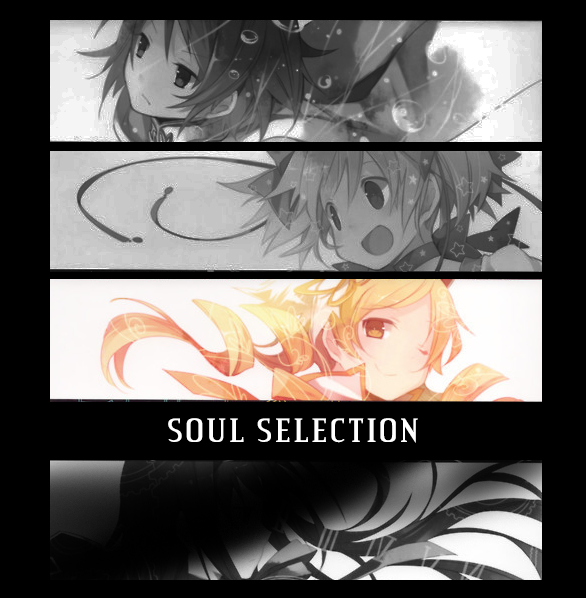
<style>
.page{position:relative;width:586px;height:598px;background:#000000}
.page>*{position:absolute;margin:0}
.t1{font:36px "CreditValley";letter-spacing:0.06em;color:#ffffff}
</style>
<div class="page">
<p class="t1" style="left:168px;top:418px;width:250px;height:25px">SOUL SELECTION</p>
</div>
